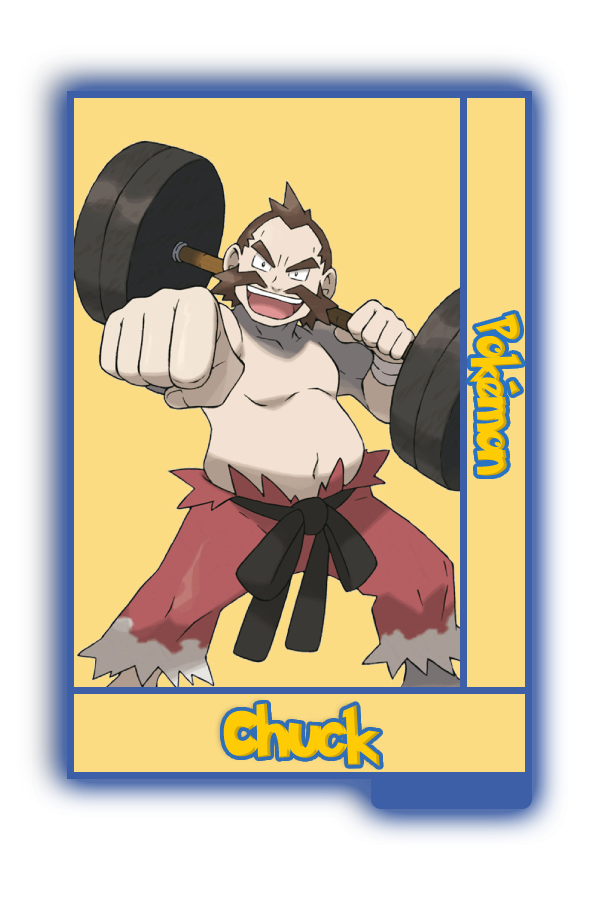
<style>
.page{position:relative;width:600px;height:900px;background:#fbdc83}
.page>*{position:absolute;margin:0}
.t1{font:48.8px "PokemonSolidNormal";color:#ffcb05;scale:0.8 1}
.t2{font:56.6px "PokemonSolidNormal";color:#ffcb05;scale:0.92 1}
</style>
<div class="page">
<p class="t1" style="left:469px;top:313px;width:54px;height:163px;rotate:90deg">Pokémon</p>
<p class="t2" style="left:223px;top:703px;width:157px;height:64px">Chuck</p>
</div>
